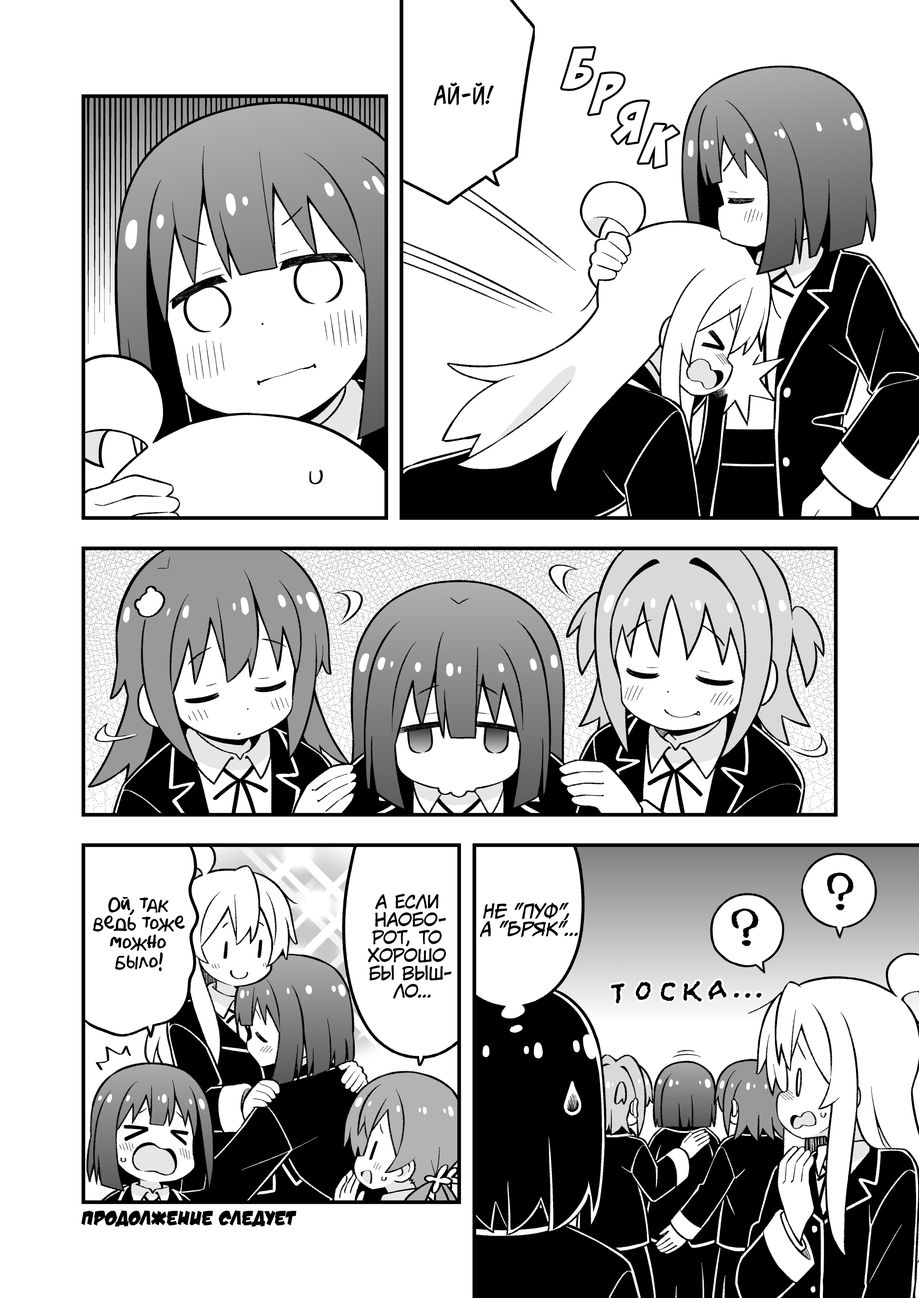
<style>
.page{position:relative;width:919px;height:1298px;background:#ffffff}
.page>*{position:absolute;margin:0}
.t1{font:63.8px "BadaBoom";color:#ffffff}
.t2{font:23px "v_CCJeffCampbell";color:#000000;text-transform:uppercase}
.t3{font:17.9px "KuraiVoice2";color:#000000;text-transform:uppercase}
.t4{font:19.1px "AkbarPlain";color:#000000}
.t5{font:17.9px "CCMeanwhile";color:#000000;text-transform:uppercase;font-style:italic}
.t6{font:30.6px "el_CCEvilSchemes";color:#000000;text-transform:uppercase}
.t7{font:20.4px "v_DamnNoisyKids";color:#000000;text-transform:uppercase}
</style>
<div class="page">
<p class="t1" style="left:562px;top:48px;width:32px;height:41px;rotate:8deg">б</p>
<p class="t1" style="left:589px;top:74px;width:35px;height:40px;rotate:8deg">р</p>
<p class="t2" style="left:434px;top:82px;width:60px;height:24px">Ай-й!</p>
<p class="t1" style="left:613px;top:101px;width:35px;height:42px;rotate:6deg">я</p>
<p class="t1" style="left:639px;top:125px;width:39px;height:42px;rotate:13deg">к</p>
<p class="t3" style="left:368px;top:893px;width:83px;height:106px;text-align:center">А если<br>наобо-<br>рот, то<br>хорошо<br>бы выш-<br>ло...</p>
<p class="t4" style="left:93px;top:896px;width:92px;height:75px;text-align:center">Ой, так<br>ведь тоже<br>можно<br>было!</p>
<p class="t5" style="left:479px;top:902px;width:99px;height:35px;text-align:center">Не "пуф",<br>а "бряк"...</p>
<p class="t6" style="left:611px;top:983px;width:14px;height:20px">т</p>
<p class="t6" style="left:636px;top:981px;width:15px;height:19px">о</p>
<p class="t6" style="left:661px;top:982px;width:15px;height:19px">с</p>
<p class="t6" style="left:683px;top:981px;width:19px;height:20px">к</p>
<p class="t6" style="left:708px;top:980px;width:19px;height:19px">а</p>
<p class="t6" style="left:734px;top:993px;width:5px;height:5px">.</p>
<p class="t6" style="left:745px;top:993px;width:5px;height:5px">.</p>
<p class="t6" style="left:756px;top:993px;width:6px;height:5px">.</p>
<p class="t7" style="left:81px;top:1210px;width:216px;height:17px">Продолжение следует</p>
</div>
